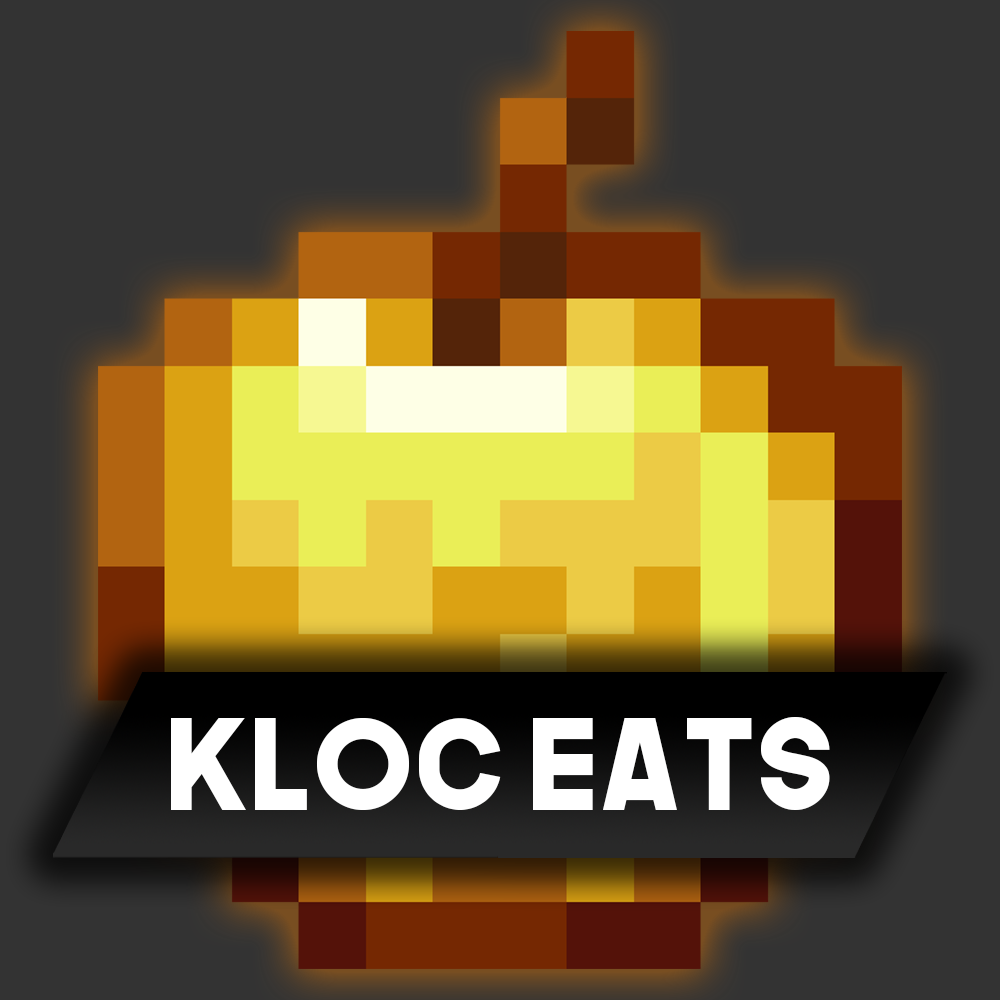
<style>
.page{position:relative;width:1000px;height:1000px;background:#333333}
.page>*{position:absolute;margin:0}
.t1{font:125.1px "TheNextFont";color:#ffffff}
</style>
<div class="page">
<p class="t1" style="left:171px;top:717px;width:659px;height:93px">kloc eats</p>
</div>
